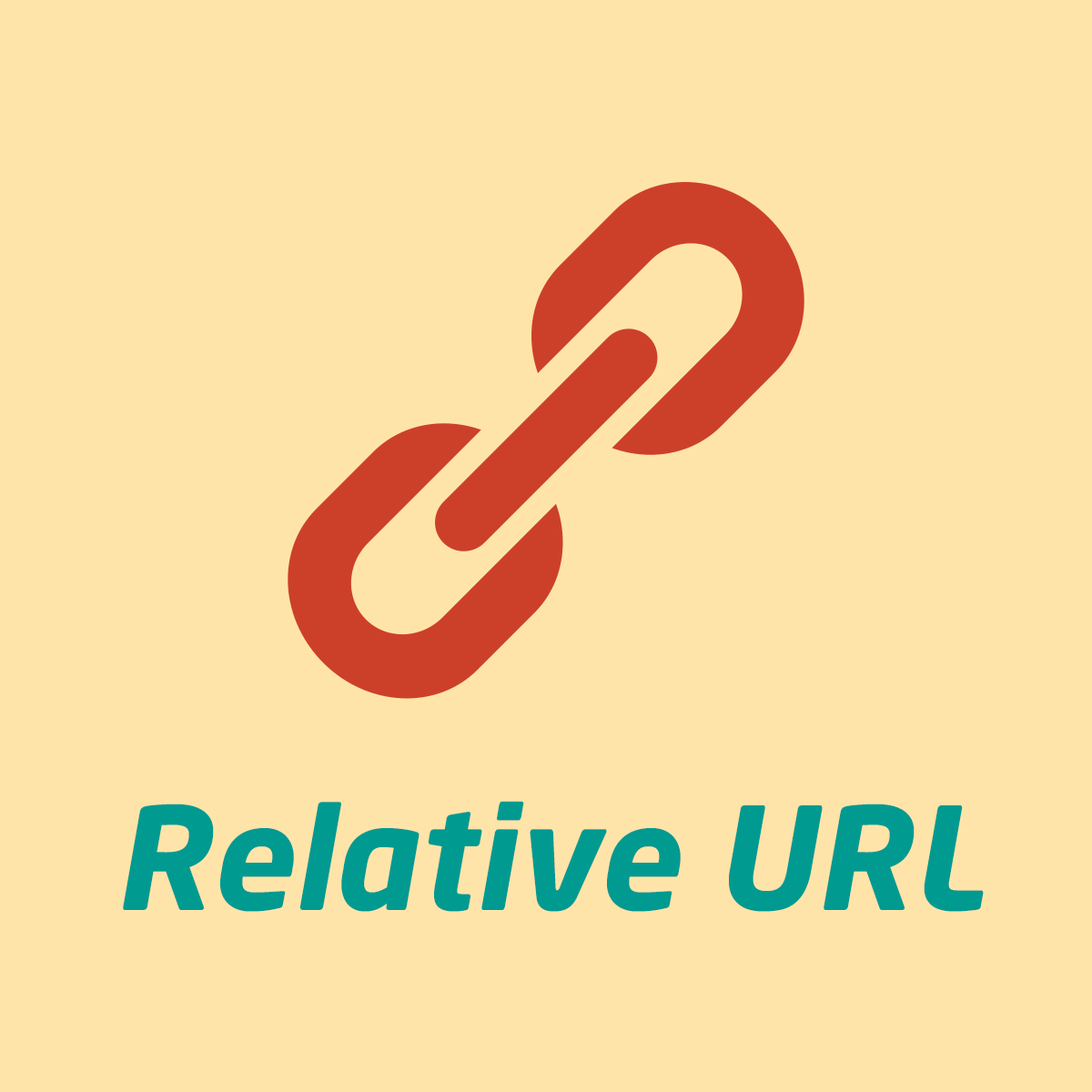
<style>
.page{position:relative;width:1092px;height:1092px;background:#ffe4a9}
.page>*{position:absolute;margin:0}
.t1{font:140.8px "NeoSansPro-BoldItalic";color:#009a91}
</style>
<div class="page">
<p class="t1" style="left:123px;top:801px;width:861px;height:111px">Relative URL</p>
</div>
